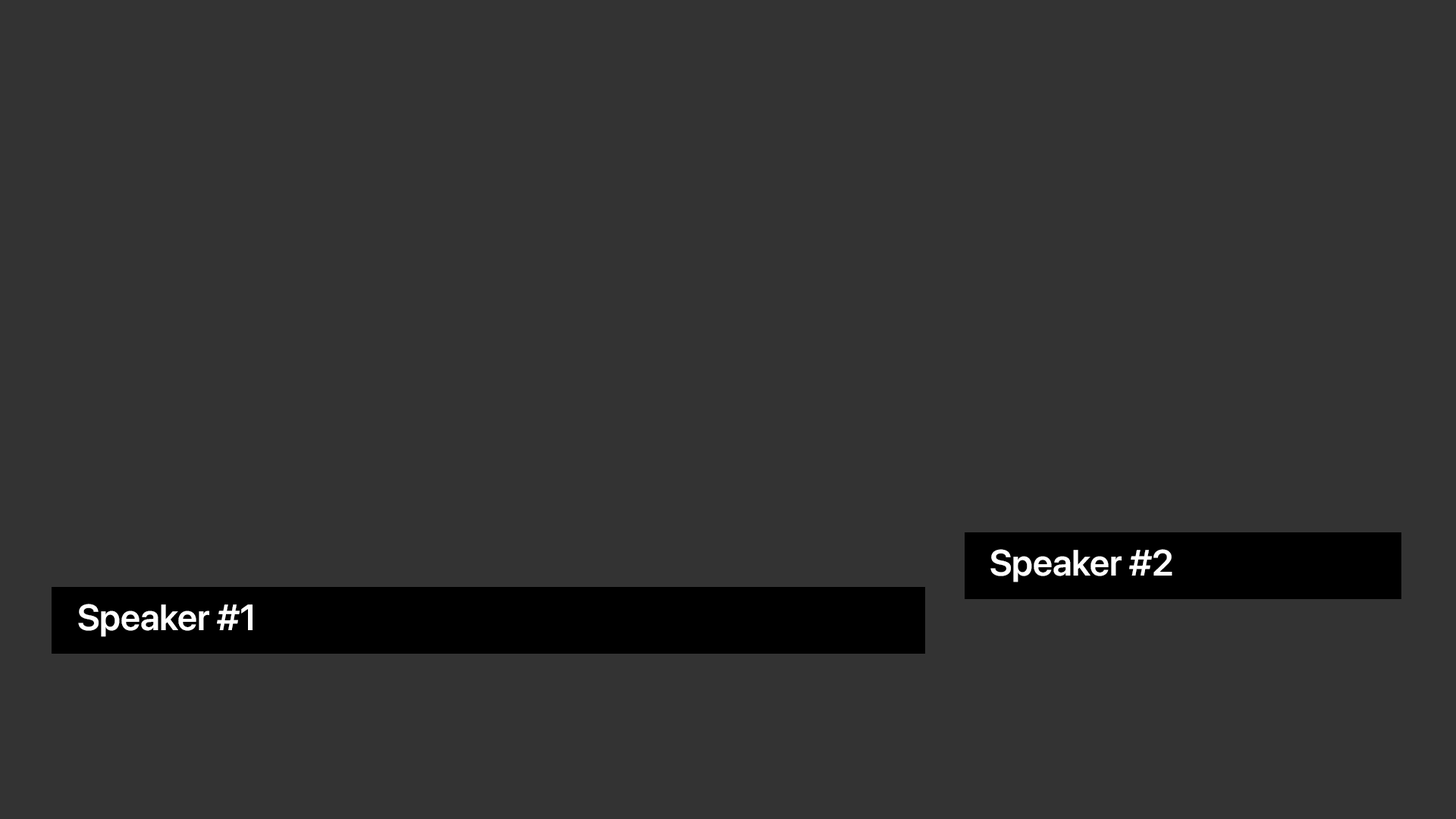
<style>
.page{position:relative;width:1456px;height:819px;background:#333333}
.page>*{position:absolute;margin:0}
.t1{font:36.4px "SFProDisplay-Semibold";color:#ffffff}
</style>
<div class="page">
<p class="t1" style="left:990px;top:549px;width:182px;height:33px">Speaker #2</p>
<p class="t1" style="left:78px;top:604px;width:175px;height:33px">Speaker #1</p>
</div>
